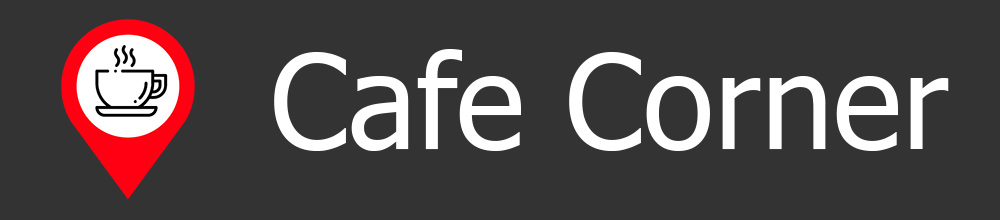
<style>
.page{position:relative;width:1000px;height:220px;background:#333333}
.page>*{position:absolute;margin:0}
.t1{font:130px "Tahoma";color:#ffffff}
</style>
<div class="page">
<p class="t1" style="left:274px;top:49px;width:675px;height:102px">Cafe Corner</p>
</div>
